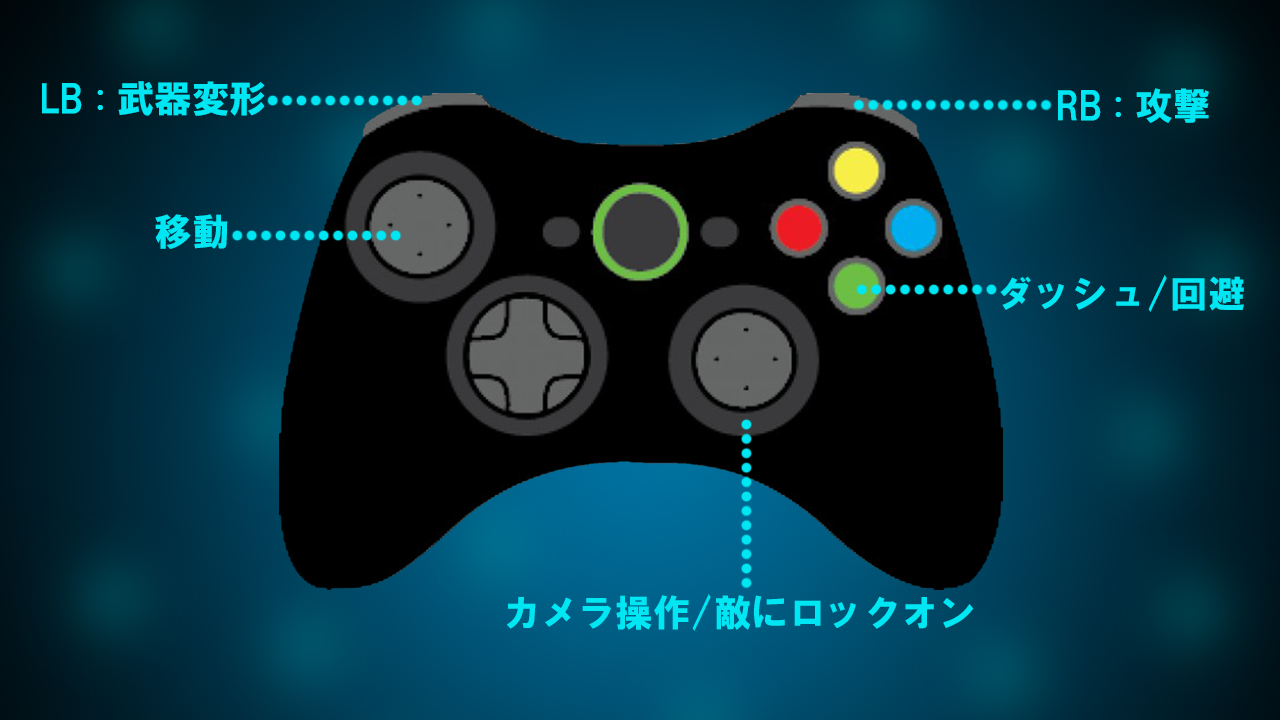
<style>
.page{position:relative;width:1280px;height:720px}
.page>*{position:absolute;margin:0}
.t1{font:37.5px "HGSSoeiKakugothicUB";color:#00e7f3}
</style>
<div class="page">
<p class="t1" style="left:42px;top:81px;width:223px;height:35px">LB : 武器変形</p>
<p class="t1" style="left:1058px;top:88px;width:151px;height:35px">RB : 攻撃</p>
<p class="t1" style="left:155px;top:214px;width:73px;height:35px">移動</p>
<p class="t1" style="left:1000px;top:275px;width:244px;height:37px">ダッシュ/回避</p>
<p class="t1" style="left:507px;top:594px;width:467px;height:37px">カメラ操作/敵にロックオン</p>
</div>
